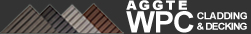
<style>
.page{position:relative;width:251px;height:34px;background:#333333}
.page>*{position:absolute;margin:0}
.t1{font:13.1px "Arial-Black";letter-spacing:0.16em;color:#ffffff;scale:1.04 1}
.t2{font:29.5px "Arial-BoldMT";letter-spacing:-0.04em;color:#ffffff;scale:1.04 1}
.t3{font:9.8px "Arial-BoldMT";letter-spacing:-0.04em;color:#ffffff;scale:1.04 1}
.t4{font:9.8px "Arial-BoldMT";letter-spacing:-0.08em;color:#ffffff;scale:1.04 1}
</style>
<div class="page">
<p class="t1" style="left:126px;top:0px;width:61px;height:10px">AGGTE</p>
<p class="t2" style="left:126px;top:11px;width:68px;height:22px">WPC</p>
<p class="t3" style="left:197px;top:12px;width:50px;height:8px">CLADDING</p>
<p class="t4" style="left:197px;top:22px;width:50px;height:8px">&amp; DECKING</p>
</div>
